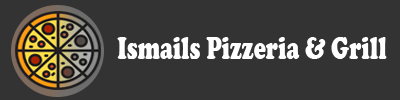
<style>
.page{position:relative;width:400px;height:100px;background:#333333}
.page>*{position:absolute;margin:0}
.t1{font:32.1px "CooperBlack";color:#ffffff;scale:0.72 1}
</style>
<div class="page">
<p class="t1" style="left:117px;top:37px;width:270px;height:22px">Ismails Pizzeria &amp; Grill</p>
</div>
